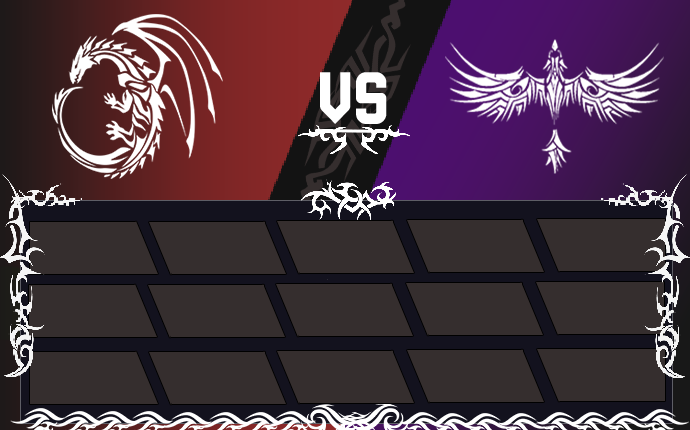
<style>
.page{position:relative;width:690px;height:430px;background:#352e2e}
.page>*{position:absolute;margin:0}
.t1{font:65.9px "A25-SQUANOVA";color:#ffffff}
</style>
<div class="page">
<p class="t1" style="left:320px;top:72px;width:67px;height:52px">Vs</p>
</div>
